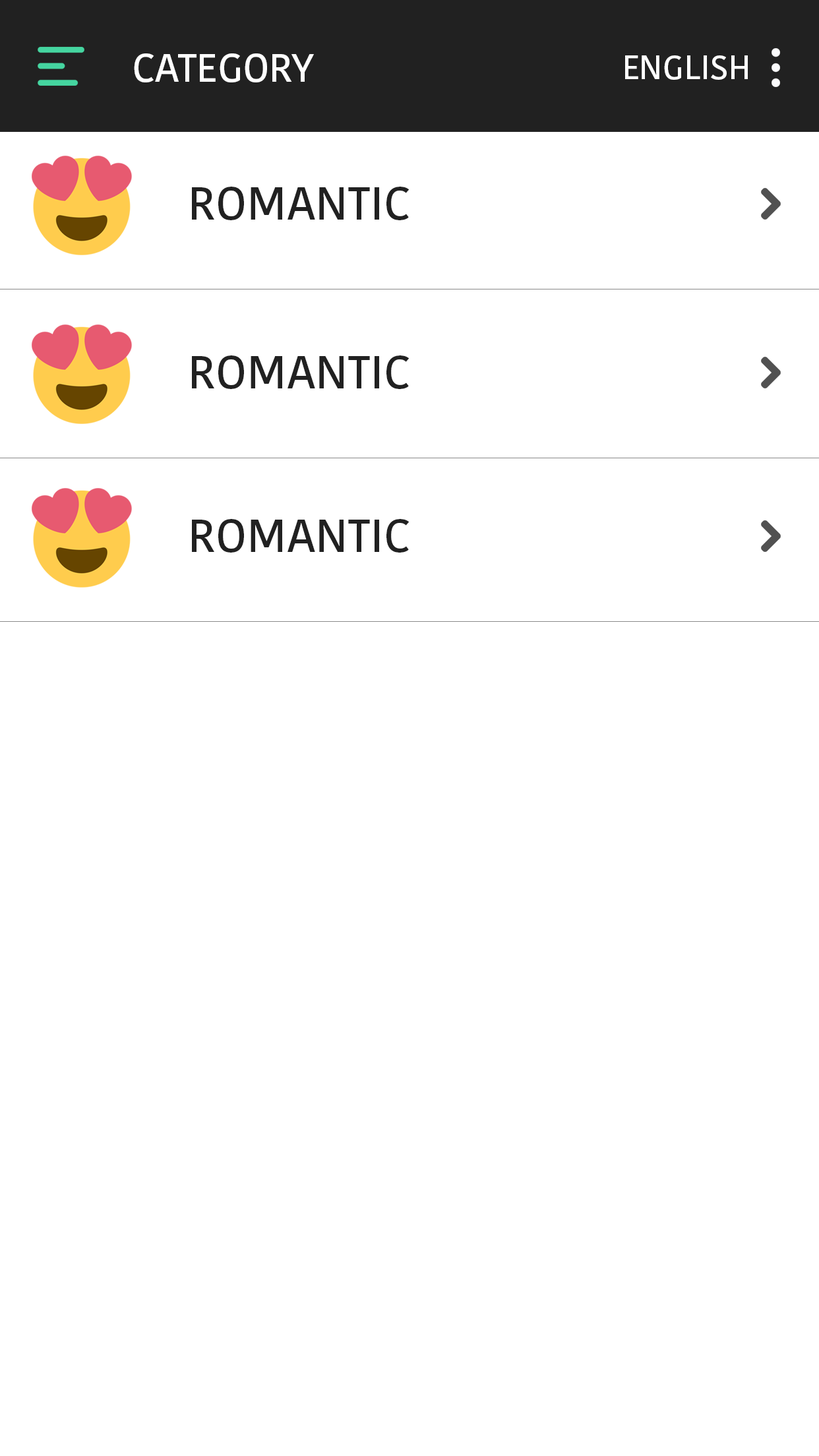
<style>
.page{position:relative;width:819px;height:1456px;background:#ffffff}
.page>*{position:absolute;margin:0}
.t1{font:39.6px "KohinoorBangla-Medium";color:#ffffff}
.t2{font:33px "KohinoorBangla-Medium";color:#ffffff}
.t3{font:46.2px "KohinoorBangla-Medium";color:#212121}
</style>
<div class="page">
<p class="t1" style="left:134px;top:53px;width:180px;height:29px">CATEGORY</p>
<p class="t2" style="left:625px;top:55px;width:123px;height:25px">ENGLISH</p>
<p class="t3" style="left:192px;top:187px;width:217px;height:33px">ROMANTIC</p>
<p class="t3" style="left:192px;top:355px;width:217px;height:34px">ROMANTIC</p>
<p class="t3" style="left:192px;top:519px;width:217px;height:34px">ROMANTIC</p>
</div>
